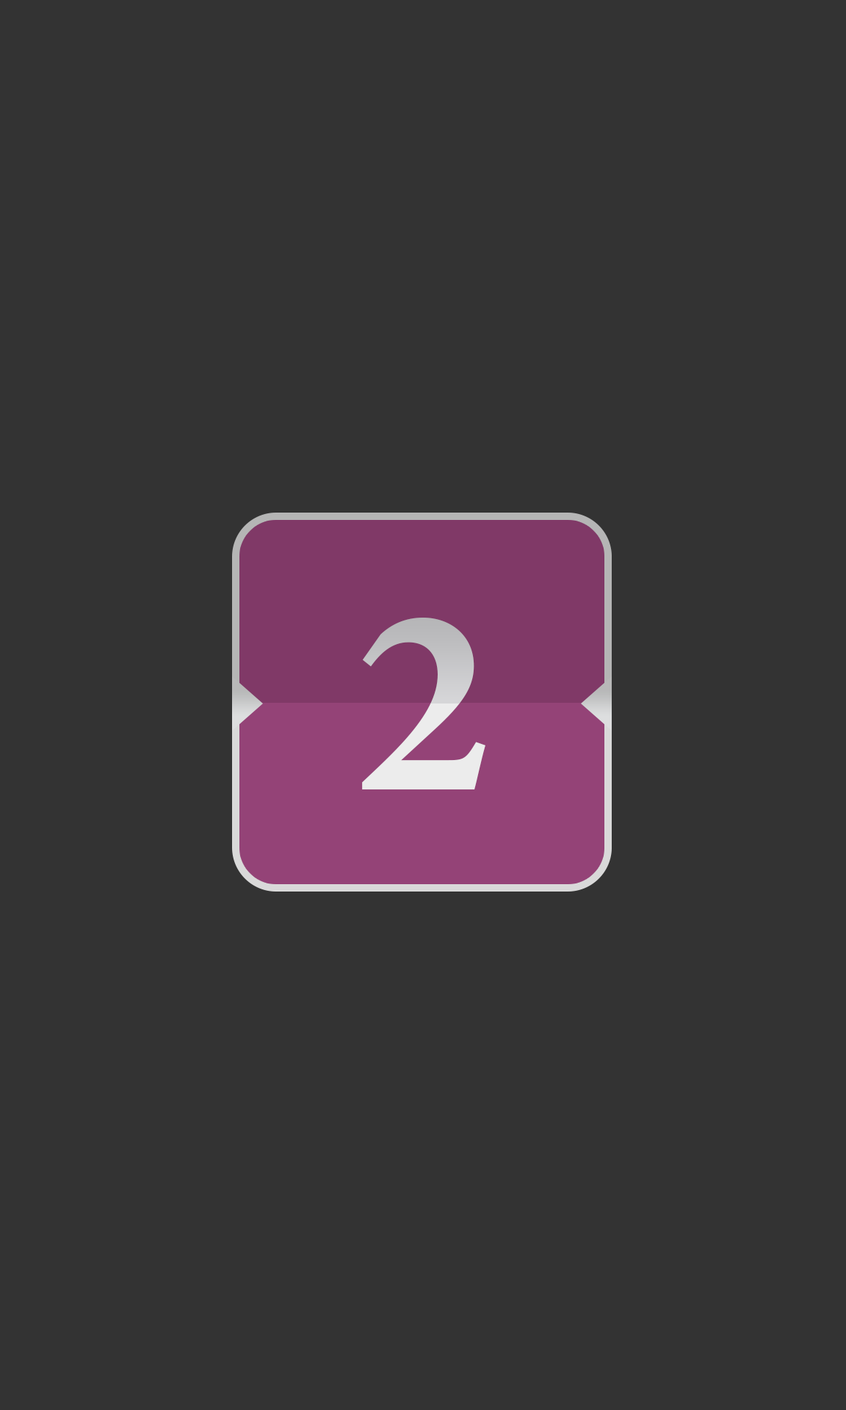
<style>
.page{position:relative;width:846px;height:1410px;background:#333333}
.page>*{position:absolute;margin:0}
.t1{font:270.9px "MinionPro-Bold";scale:1.03 1}
</style>
<div class="page">
<p class="t1" style="left:362px;top:617px;width:123px;height:172px">2</p>
</div>
